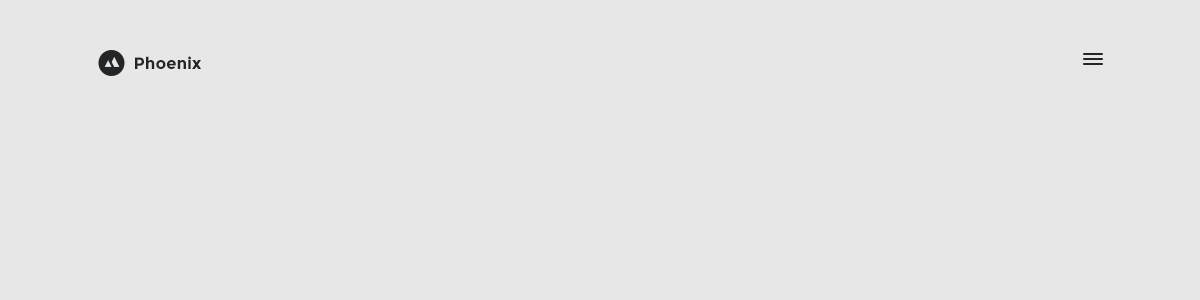
<style>
.page{position:relative;width:1200px;height:300px;background:#e7e7e7}
.page>*{position:absolute;margin:0}
.t1{font:16.4px "Montserrat-Bold";color:#242526}
</style>
<div class="page">
<p class="t1" style="left:135px;top:56px;width:66px;height:13px">Phoenix</p>
</div>
